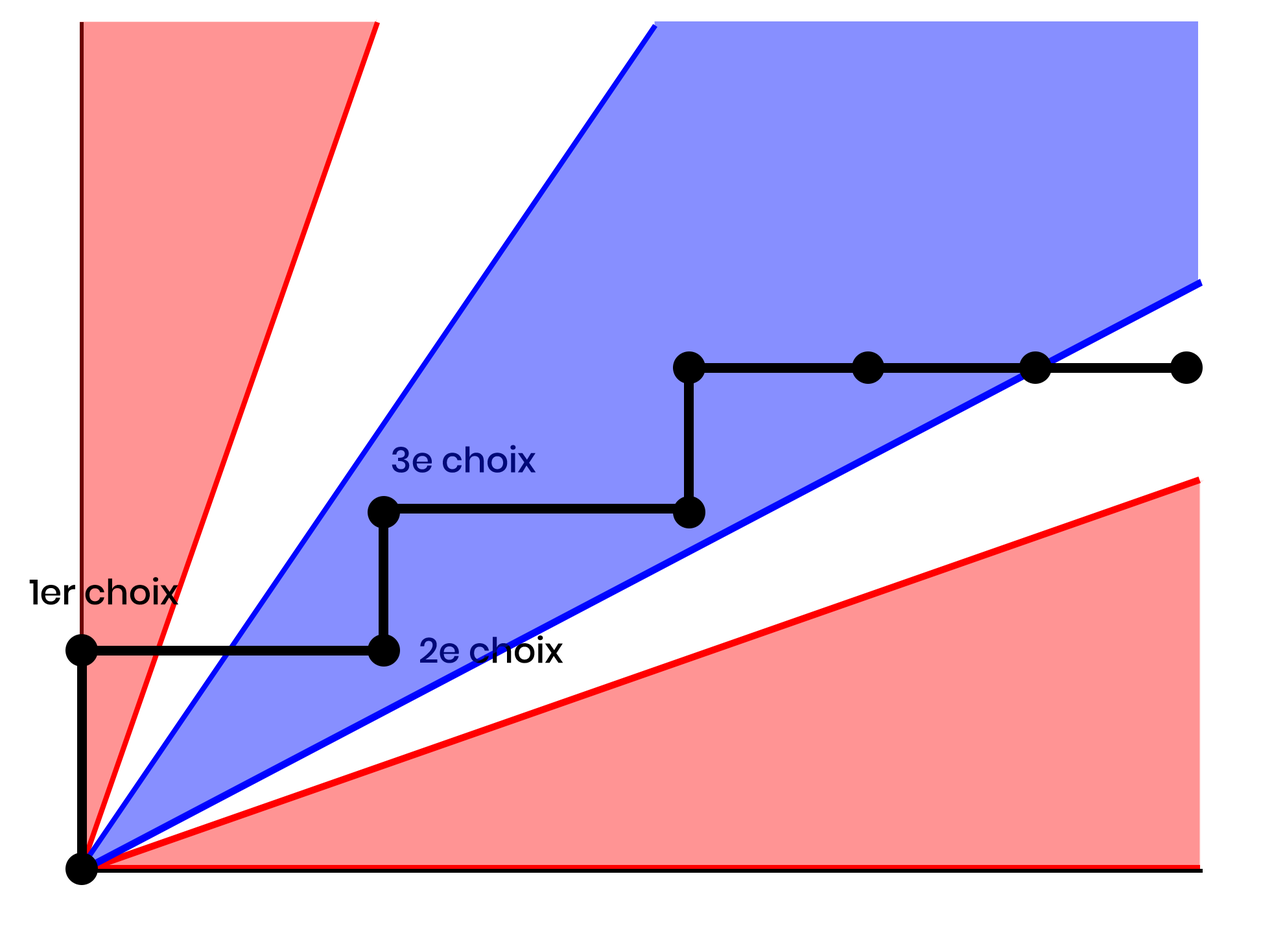
<style>
.page{position:relative;width:1261px;height:946px;background:#ffffff}
.page>*{position:absolute;margin:0}
.t1{font:35.1px "Poppins-Medium";color:#000878}
.t2{font:35.1px "Poppins-Medium";color:#000000}
.t3{font:35.1px "Poppins-Medium"}
</style>
<div class="page">
<p class="t1" style="left:392px;top:445px;width:144px;height:28px">3e choix</p>
<p class="t2" style="left:29px;top:577px;width:149px;height:28px">1er choix</p>
<p class="t3" style="left:420px;top:635px;width:143px;height:28px">2e choix</p>
</div>
